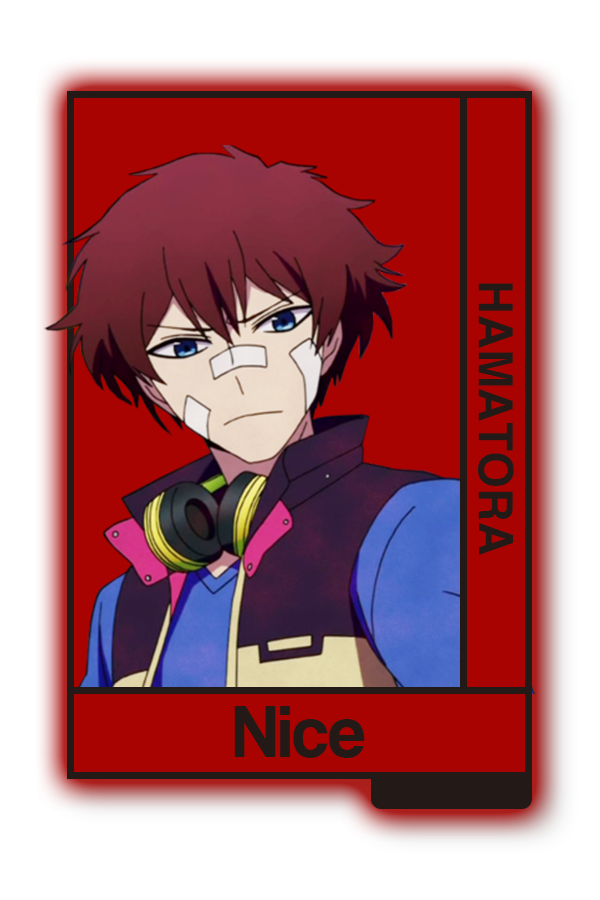
<style>
.page{position:relative;width:600px;height:900px;background:#a80301}
.page>*{position:absolute;margin:0}
.t1{font:47.4px "Helvetica-Bold";color:#231917}
.t2{font:75px "CoolveticaRg-Regular";color:#231917}
</style>
<div class="page">
<p class="t1" style="left:478px;top:283px;width:36px;height:272px;rotate:90deg">HAMATORA</p>
<p class="t2" style="left:234px;top:706px;width:131px;height:52px">Nice</p>
</div>
